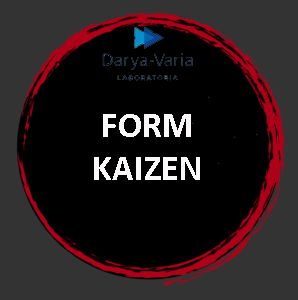
<style>
.page{position:relative;width:298px;height:300px;background:#000000}
.page>*{position:absolute;margin:0}
.t1{font:36px "Calibri-Bold";color:#faf8f8}
</style>
<div class="page">
<p class="t1" style="left:94px;top:114px;width:106px;height:66px;text-align:center">FORM<br>KAIZEN</p>
</div>
